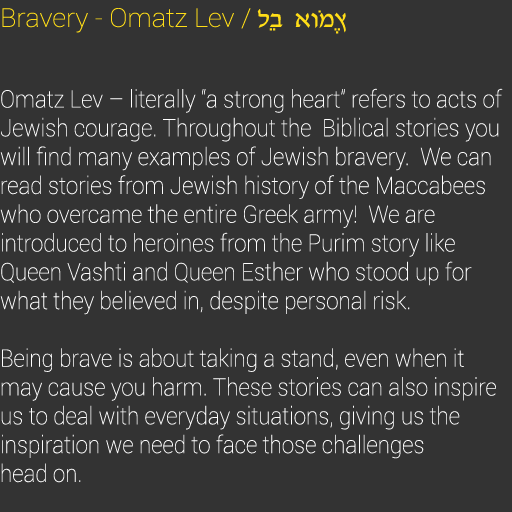
<style>
.page{position:relative;width:512px;height:512px;background:#333333}
.page>*{position:absolute;margin:0}
.t1{font:26px "Roboto-Thin";color:#ffdd17;scale:1.04 1}
.t2{font:26px "David";color:#ffdd17;scale:1.04 1}
.t3{font:24px "Roboto-Thin";color:#ffffff;scale:0.93 1}
</style>
<div class="page">
<p class="t1" style="left:2px;top:8px;width:344px;height:26px">Bravery - Omatz Lev / <span class="t2">לֵב  אוֹמֶץ</span></p>
<p class="t3" style="left:0px;top:88px;width:503px;height:395px">Omatz Lev – literally “a strong heart” refers to acts of Jewish courage. Throughout the  Biblical stories you will find many examples of Jewish bravery.  We can read stories from Jewish history of the Maccabees who overcame the entire Greek army!  We are <br>introduced to heroines from the Purim story like Queen Vashti and Queen Esther who stood up for what they believed in, despite personal risk. <br><br>Being brave is about taking a stand, even when it may cause you harm. These stories can also inspire us to deal with everyday situations, giving us the <br>inspiration we need to face those challenges <br>head on.</p>
</div>
